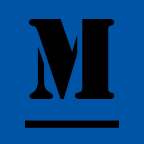
<style>
.page{position:relative;width:144px;height:144px;background:#0054a6}
.page>*{position:absolute;margin:0}
.t1{font:120px "Stencil";color:#000000;text-decoration:underline}
.t2{font:48px "TrajanPro3-Regular";color:#000000;text-decoration:underline}
</style>
<div class="page">
<p class="t1" style="left:24px;top:19px;width:95px;height:109px"><span class="t2"><br></span>M</p>
</div>
